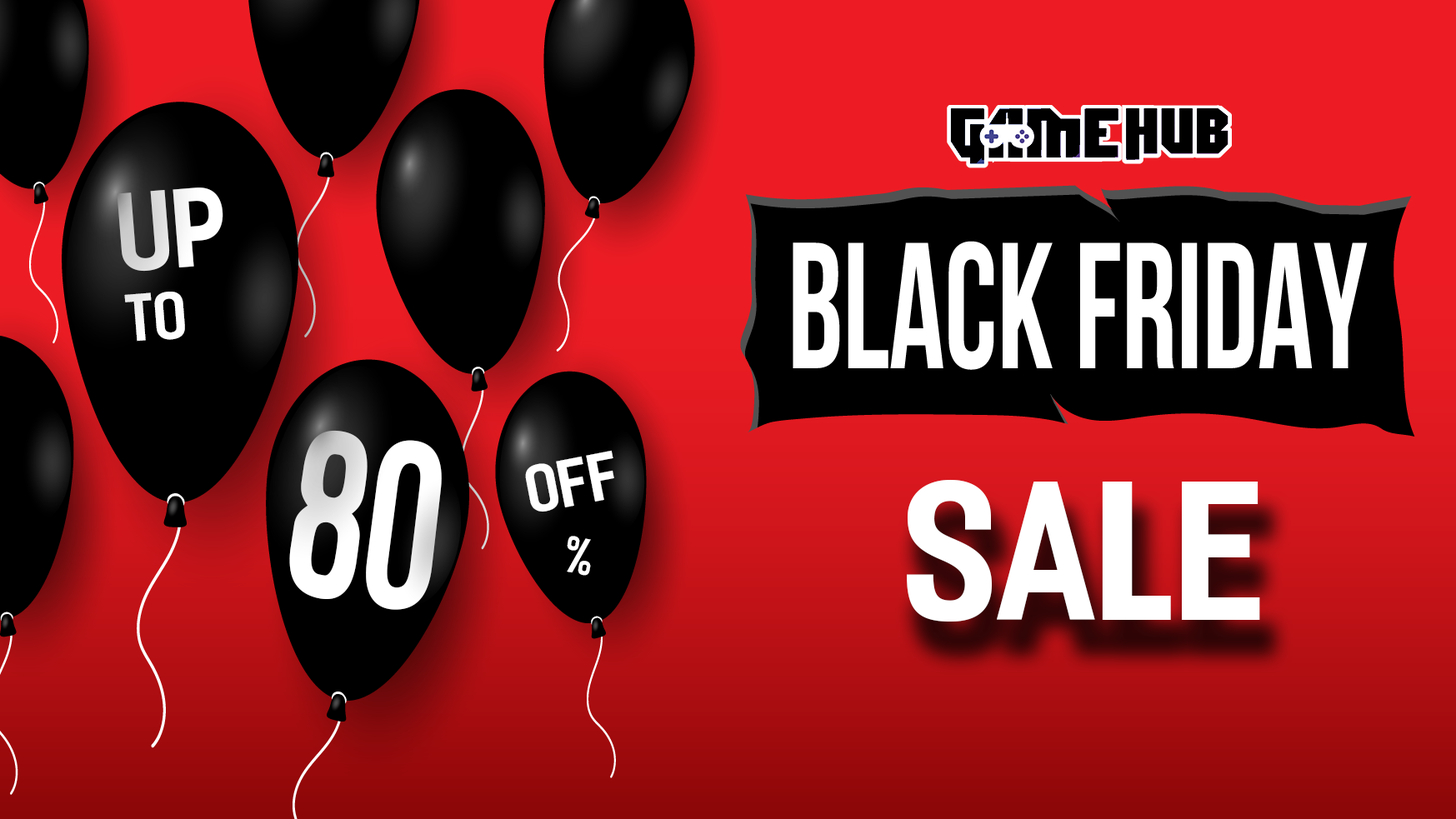
<style>
.page{position:relative;width:1456px;height:819px}
.page>*{position:absolute;margin:0}
.t1{font:104.2px "iCielFesterSemiCondensed-Bold";letter-spacing:0.005em}
.t2{font:62.5px "iCielFesterSemiCondensed-Bold";letter-spacing:0.005em;color:#ffffff}
.t3{font:167.7px "iCielFesterSemiCondensed-Bold";letter-spacing:0.005em;color:#ffffff;scale:0.97 1}
.t4{font:184.3px "iCielFesterSemiCondensed-Bold";letter-spacing:0.005em;color:#ffffff}
.t5{font:47.8px "iCielFesterSemiCondensed-Bold";letter-spacing:0.005em;color:#ffffff}
</style>
<div class="page">
<p class="t1" style="left:117px;top:187px;width:106px;height:85px;rotate:-5deg">up</p>
<p class="t2" style="left:124px;top:292px;width:61px;height:50px;rotate:-5deg">to</p>
<p class="t3" style="left:289px;top:430px;width:153px;height:180px;rotate:7deg">80</p>
<p class="t2" style="left:525px;top:450px;width:89px;height:62px;rotate:-11deg">off</p>
<p class="t4" style="left:907px;top:479px;width:353px;height:143px">sale</p>
<p class="t5" style="left:567px;top:536px;width:24px;height:40px;rotate:11deg">%</p>
</div>
